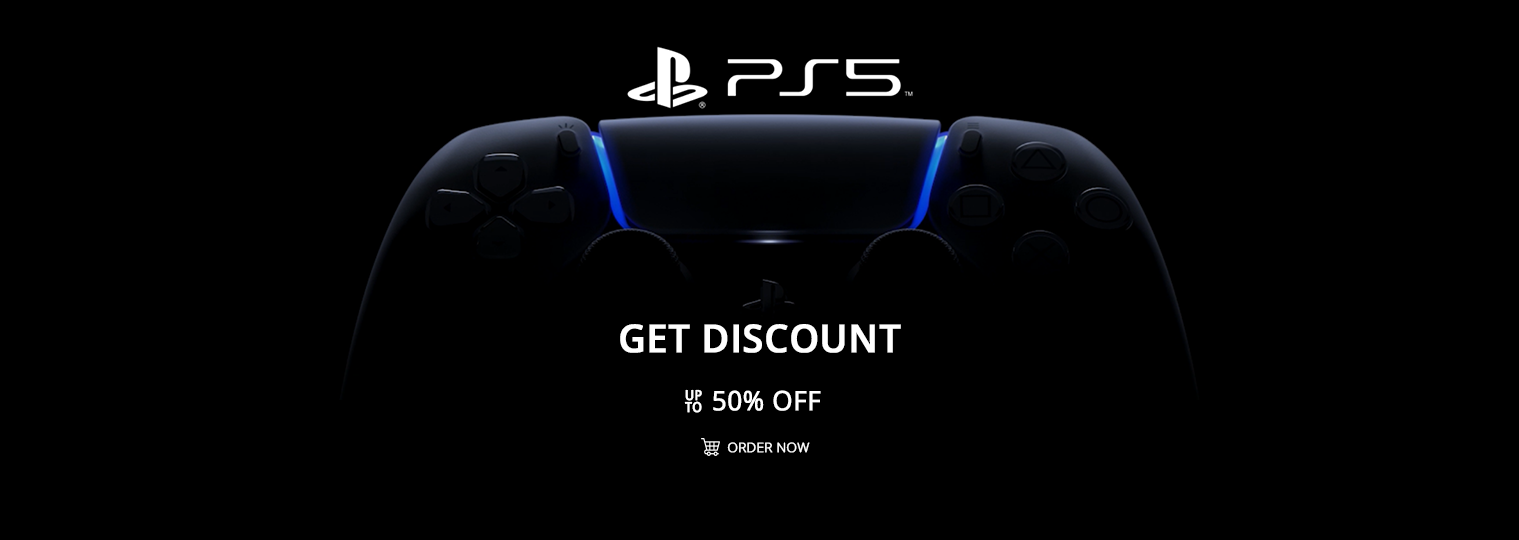
<style>
.page{position:relative;width:1519px;height:540px;background:#000000}
.page>*{position:absolute;margin:0}
.t1{font:38.6px "OpenSans-Semibold";color:#ffffff;font-weight:bold}
.t2{font:14.1px/11.8px "OpenSans-Semibold";color:#ffffff;font-weight:bold;scale:0.86 1}
.t3{font:26.9px "OpenSans";color:#ffffff;font-weight:bold;scale:0.96 1}
.t4{font:12.9px "OpenSans-Light";color:#ffffff;font-weight:bold;scale:1.04 1}
</style>
<div class="page">
<p class="t1" style="left:620px;top:324px;width:281px;height:29px">GET DISCOUNT</p>
<p class="t2" style="left:684px;top:389px;width:18px;height:24px;text-align:center">UP<br>TO</p>
<p class="t3" style="left:713px;top:390px;width:108px;height:21px">50% OFF</p>
<p class="t4" style="left:727px;top:442px;width:83px;height:11px">ORDER NOW</p>
</div>
